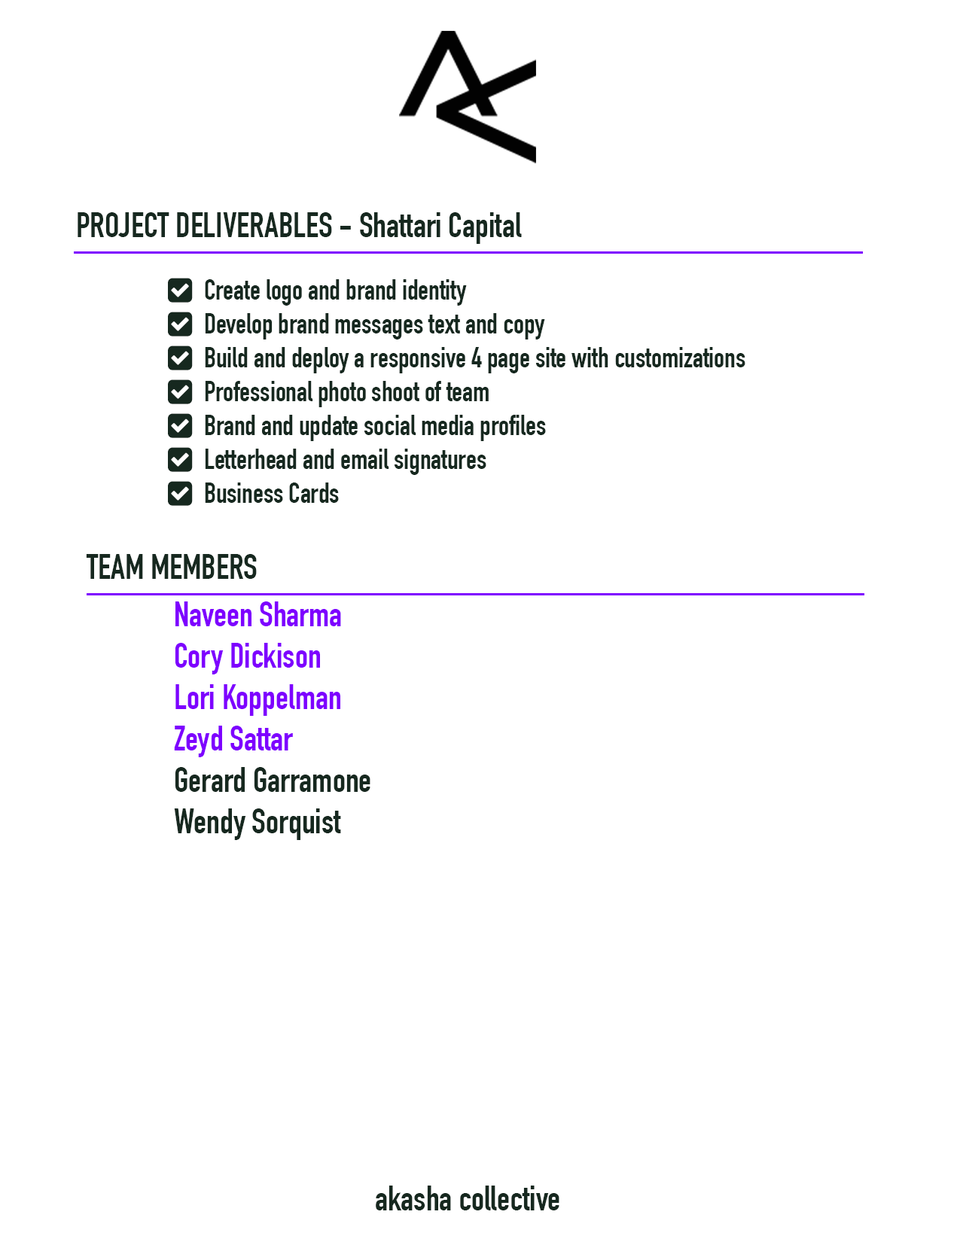
<style>
.page{position:relative;width:960px;height:1242px;background:#ffffff}
.page>*{position:absolute;margin:0}
.t1{font:34.5px "DINCondensed-Bold";color:#16281f}
.t2{font:28.2px "DINCondensed-Bold";color:#16281f}
.t3{font:34.5px "DINCondensed-Bold";color:#7e00ff}
</style>
<div class="page">
<p class="t1" style="left:78px;top:212px;width:444px;height:32px">PROJECT DELIVERABLES - Shattari Capital</p>
<p class="t2" style="left:205px;top:279px;width:540px;height:224px">Create logo and brand identity<br>Develop brand messages text and copy<br>Build and deploy a responsive 4 page site with customizations<br>Professional photo shoot of team<br>Brand and update social media profiles<br>Letterhead and email signatures<br>Business Cards</p>
<p class="t1" style="left:86px;top:554px;width:171px;height:25px">TEAM MEMBERS</p>
<p class="t3" style="left:174px;top:602px;width:196px;height:238px">Naveen Sharma <br>Cory Dickison<br>Lori Koppelman<br>Zeyd Sattar<br><span class="t1">Gerard Garramone<br>Wendy Sorquist</span></p>
<p class="t1" style="left:376px;top:1186px;width:183px;height:25px">akasha collective</p>
</div>
